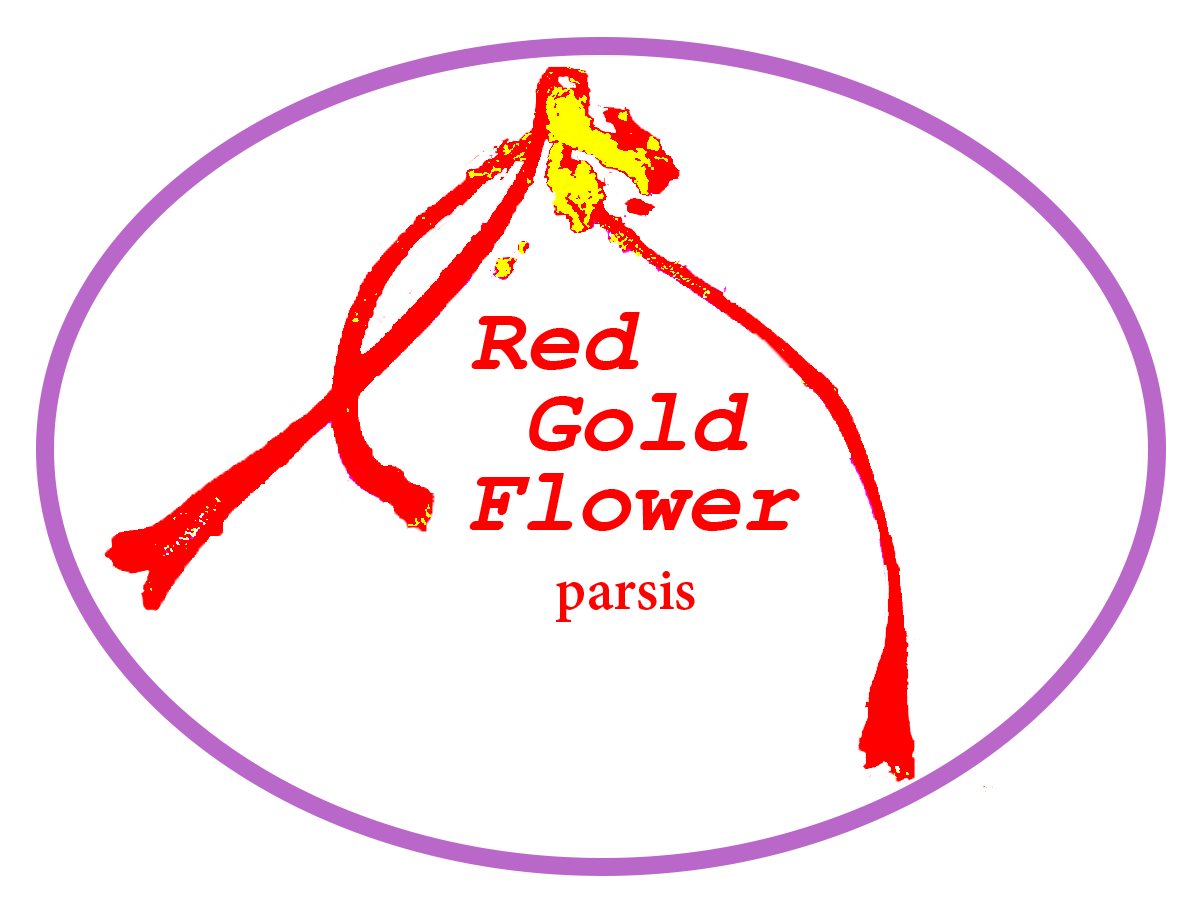
<style>
.page{position:relative;width:1200px;height:900px;background:#ffffff}
.page>*{position:absolute;margin:0}
.t1{font:92px "CourierNewPS-BoldItalicMT";color:#ff0000}
.t2{font:63px "AdobeDevanagari-Bold";color:#ff0000}
</style>
<div class="page">
<p class="t1" style="left:471px;top:312px;width:169px;height:58px">Red</p>
<p class="t1" style="left:529px;top:393px;width:220px;height:58px">Gold</p>
<p class="t1" style="left:469px;top:473px;width:331px;height:58px">Flower</p>
<p class="t2" style="left:556px;top:571px;width:139px;height:51px">parsis</p>
</div>
